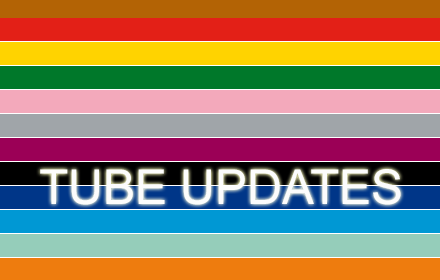
<style>
.page{position:relative;width:440px;height:280px}
.page>*{position:absolute;margin:0}
.t1{font:48px "ArialMT";color:#fcfcfc}
</style>
<div class="page">
<p class="t1" style="left:40px;top:169px;width:361px;height:36px">TUBE UPDATES</p>
</div>
